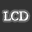
<style>
.page{position:relative;width:32px;height:32px;background:#333333}
.page>*{position:absolute;margin:0}
.t1{font:11px "UglyQua";letter-spacing:0.025em;color:#ffffff;font-weight:bold}
</style>
<div class="page">
<p class="t1" style="left:3px;top:11px;width:26px;height:10px">LCD</p>
</div>
